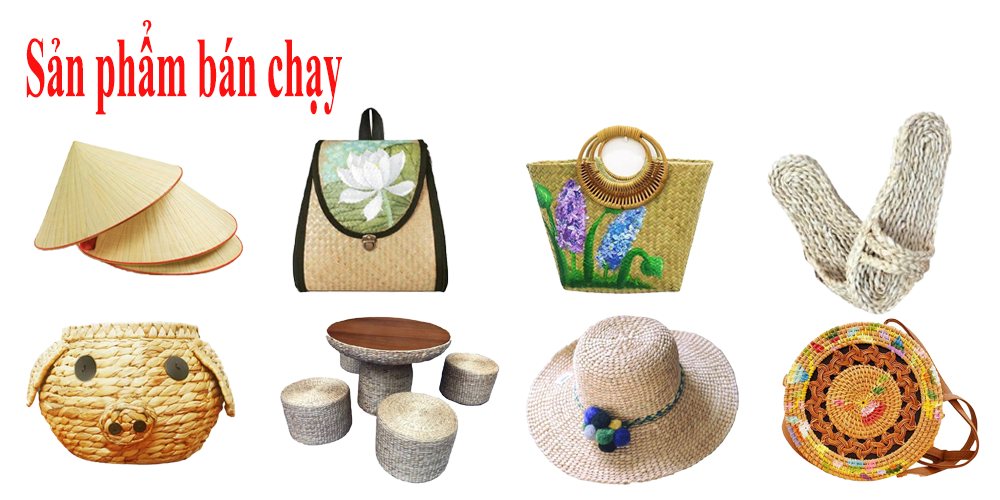
<style>
.page{position:relative;width:1000px;height:500px;background:#ffffff}
.page>*{position:absolute;margin:0}
.t1{font:85.2px "TimesNewRomanPS-BoldMT";color:#fc1111;scale:0.44 1}
</style>
<div class="page">
<p class="t1" style="left:26px;top:20px;width:316px;height:95px">Sản phẩm bán chạy</p>
</div>
